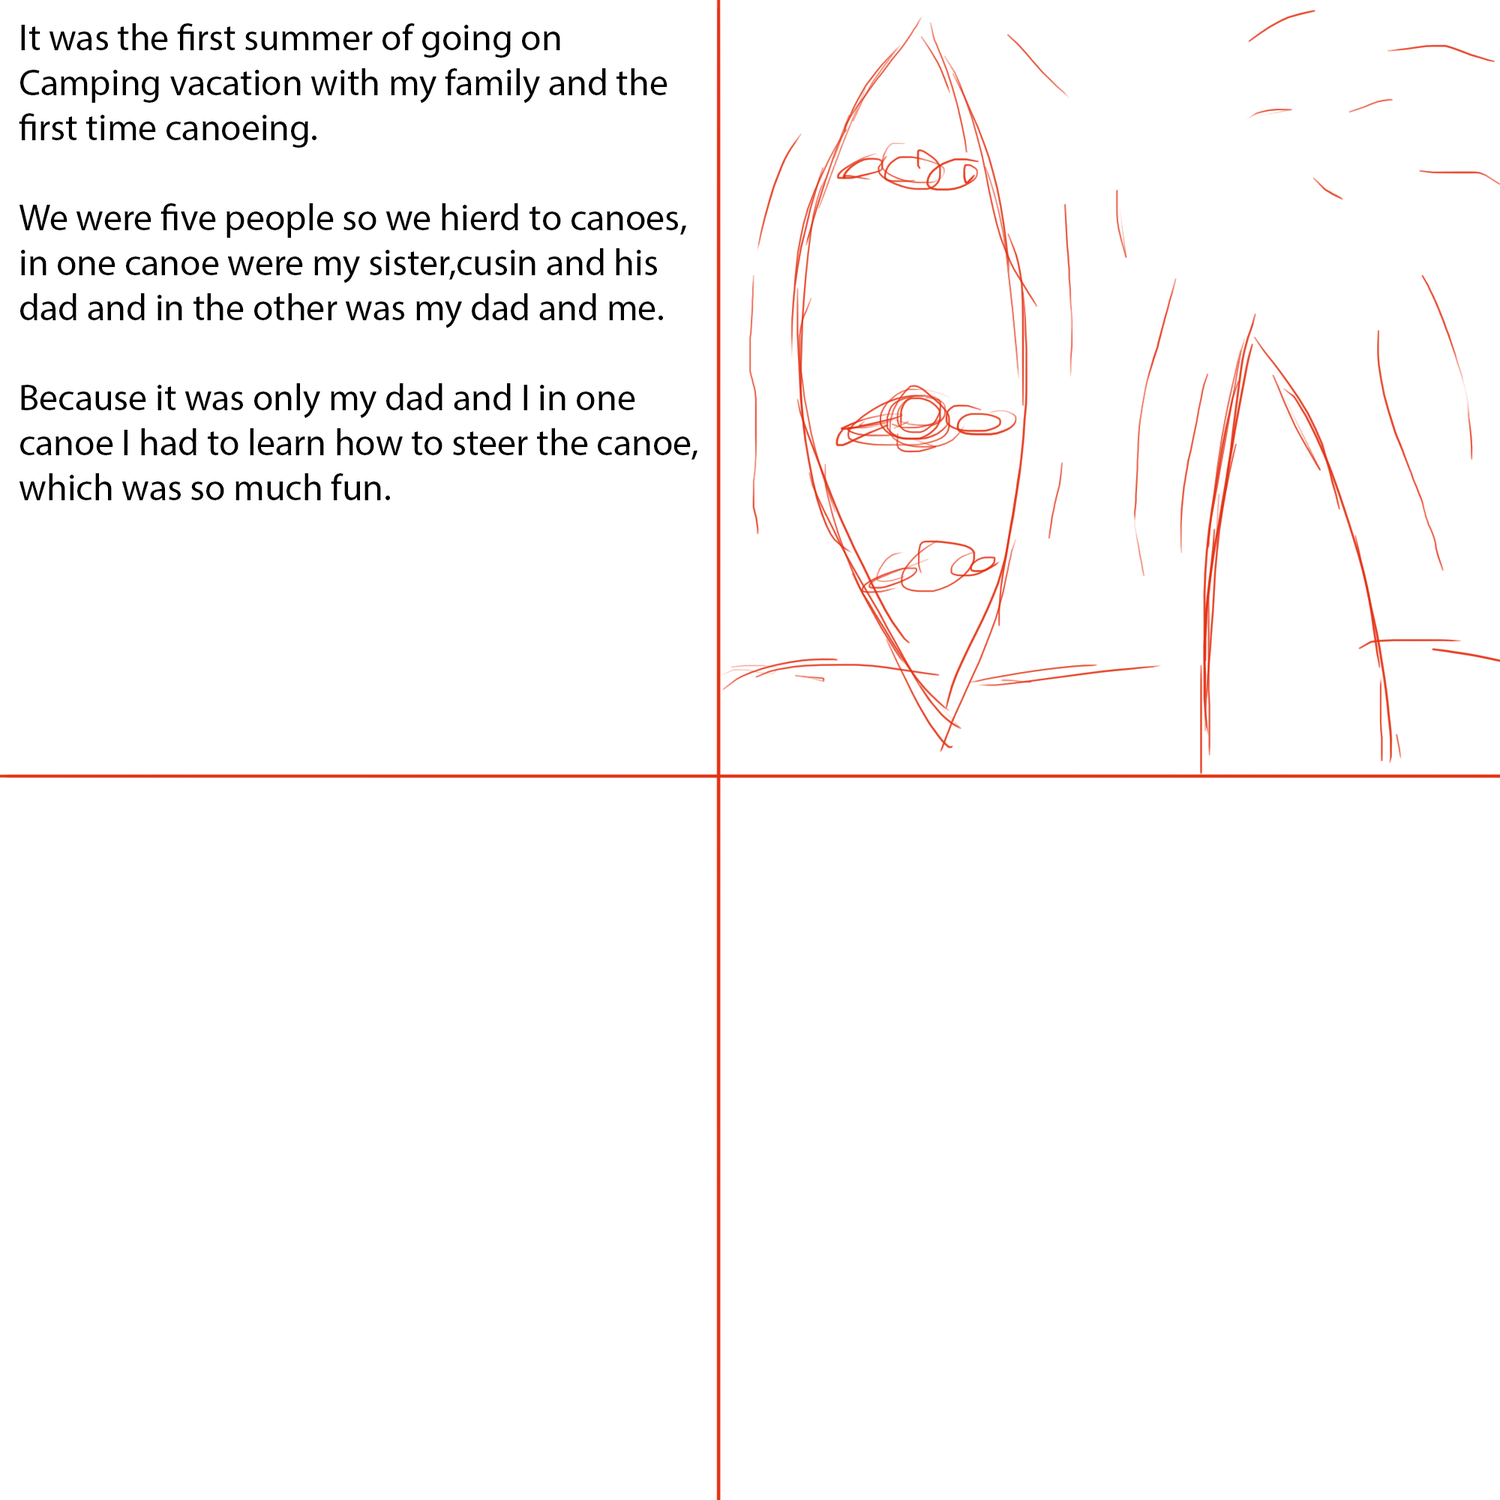
<style>
.page{position:relative;width:1500px;height:1500px;background:#ffffff}
.page>*{position:absolute;margin:0}
.t1{font:9px "MyriadPro-Regular";color:#000000}
</style>
<div class="page">
<p class="t1" style="left:19px;top:23px;width:679px;height:477px">It was the first summer of going on Camping vacation with my family and the first time canoeing.<br><br>We were five people so we hierd to canoes, in one canoe were my sister,cusin and his dad and in the other was my dad and me. <br><br>Because it was only my dad and I in one canoe I had to learn how to steer the canoe, which was so much fun.</p>
</div>
